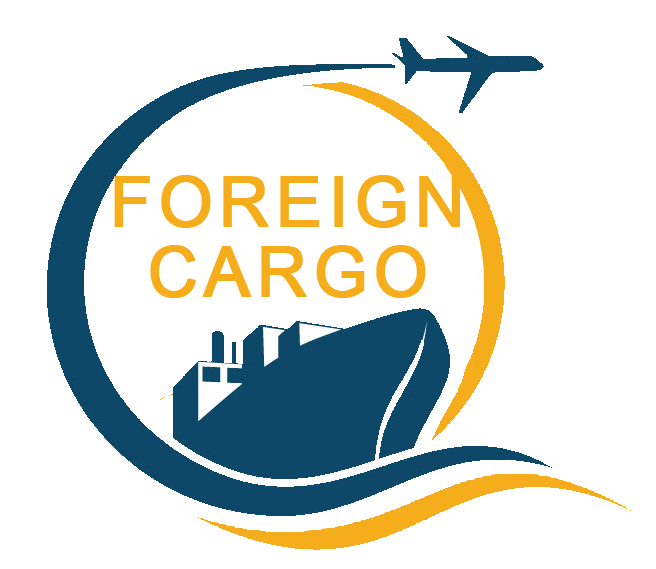
<style>
.page{position:relative;width:656px;height:569px;background:#ffffff}
.page>*{position:absolute;margin:0}
.t1{font:70.1px/70.1px "ArialMT";letter-spacing:0.075em;color:#f5ad1b;font-weight:bold}
</style>
<div class="page">
<p class="t1" style="left:114px;top:175px;width:346px;height:123px;text-align:center">FOREIGN<br>CARGO</p>
</div>
